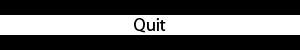
<style>
.page{position:relative;width:300px;height:50px;background:#000000}
.page>*{position:absolute;margin:0}
.t1{font:18px "MyriadPro-Regular";color:#000000}
</style>
<div class="page">
<p class="t1" style="left:134px;top:18px;width:32px;height:15px">Quit</p>
</div>
